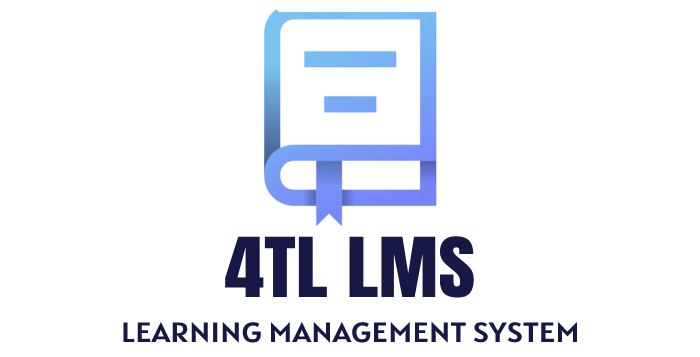
<style>
.page{position:relative;width:700px;height:357px;background:#ffffff}
.page>*{position:absolute;margin:0}
.t1{font:70.1px "Anton-Regular";color:#171846;scale:1.15 1}
.t2{font:27.9px "Alatsi-Regular";color:#171846;text-transform:uppercase;scale:1.17 1}
</style>
<div class="page">
<p class="t1" style="left:225px;top:236px;width:249px;height:62px">4TL LMS</p>
<p class="t2" style="left:123px;top:322px;width:454px;height:21px">Learning Management System</p>
</div>
